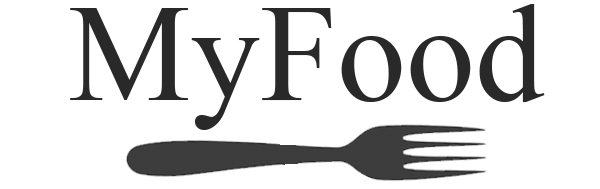
<style>
.page{position:relative;width:600px;height:189px;background:#ffffff}
.page>*{position:absolute;margin:0}
.t1{font:138px "TimesNewRomanPSMT";color:#292929}
</style>
<div class="page">
<p class="t1" style="left:70px;top:4px;width:475px;height:126px">MyFood</p>
</div>
